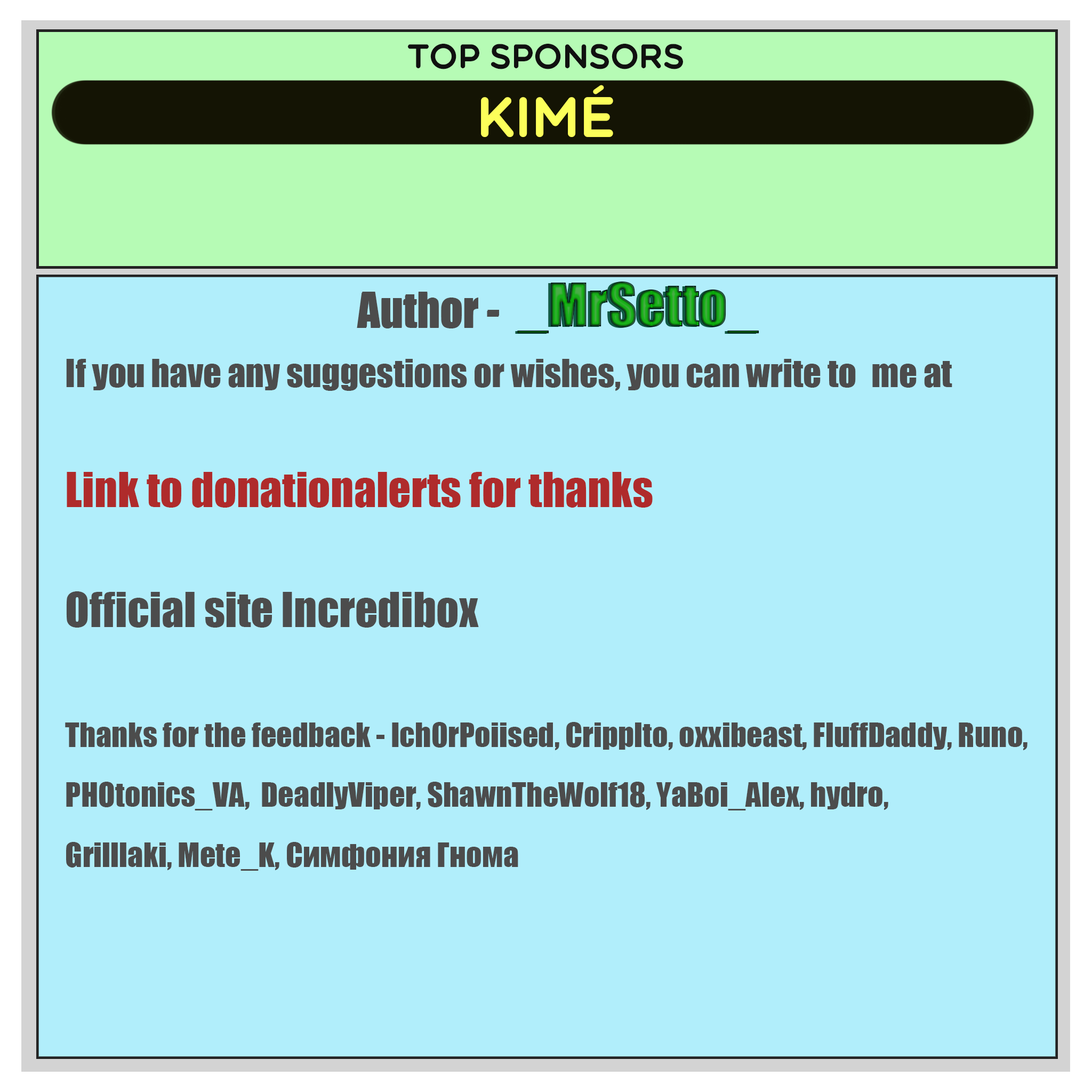
<style>
.page{position:relative;width:1092px;height:1092px;background:#b1eefb}
.page>*{position:absolute;margin:0}
.t1{font:31.1px/60px "Impact";color:#4c4c4c}
.t2{font:44.4px/60px "Impact";color:#4c4c4c}
.t3{font:55.5px/60px "Impact";color:#115b45}
.t4{font:35.5px/60px "Impact";color:#4c4c4c}
.t5{font:44.4px/60px "Impact";color:#af2b2b}
</style>
<div class="page">
<p class="t1" style="left:65px;top:282px;width:962px;height:589px;text-align:center"><span class="t2">Author -  </span><span class="t3">_MrSetto_                <br></span><span class="t4">If you have any suggestions or wishes, you can write to  me at                   <br><br></span><span class="t5">Link to donationalerts for thanks</span><span class="t2">                  <br><br>Official site Incredibox  <br><br></span>Thanks for the feedback - Ich0rPoiised, Cripplto, oxxibeast, FluffDaddy, Runo,      PHOtonics_VA,  DeadlyViper, ShawnTheWolf18, YaBoi_Alex, hydro, <br>Grilllaki, Mete_K, Симфония Гнома</p>
</div>
